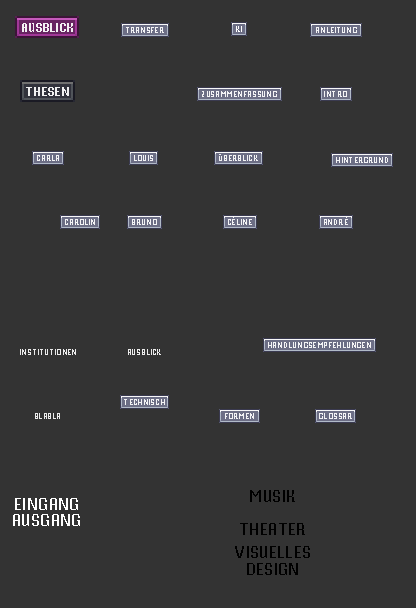
<style>
.page{position:relative;width:416px;height:608px;background:#333333}
.page>*{position:absolute;margin:0}
.t1{font:12.5px "VTFMisterPixel";color:#ffffff}
.t2{font:8.3px "VTFMisterPixel";color:#ffffff;text-transform:uppercase}
.t3{font:8.3px "VTFMisterPixel";color:#ffffff}
.t4{font:16.7px "VTFMisterPixel";color:#000000;text-transform:uppercase}
.t5{font:16.7px/16.7px "VTFMisterPixel";color:#ffffff;text-transform:uppercase}
.t6{font:16.7px/16.7px "VTFMisterPixel";color:#000000;text-transform:uppercase}
</style>
<div class="page">
<p class="t1" style="left:22px;top:23px;width:51px;height:9px;opacity:0.9">AUSBLICK</p>
<p class="t2" style="left:126px;top:27px;width:38px;height:6px;opacity:0.9">Transfer</p>
<p class="t3" style="left:236px;top:26px;width:6px;height:6px">KI</p>
<p class="t3" style="left:316px;top:27px;width:41px;height:6px;opacity:0.9">ANLEITUNG</p>
<p class="t1" style="left:26px;top:87px;width:43px;height:9px;opacity:0.9">THESEN</p>
<p class="t3" style="left:202px;top:91px;width:75px;height:6px;opacity:0.9">ZUSAMMENFASSUNG</p>
<p class="t3" style="left:324px;top:91px;width:23px;height:6px;opacity:0.9">INTRO</p>
<p class="t2" style="left:37px;top:155px;width:22px;height:6px;opacity:0.9">Carla</p>
<p class="t2" style="left:134px;top:155px;width:19px;height:6px;opacity:0.9">Louis</p>
<p class="t2" style="left:219px;top:154px;width:39px;height:7px;opacity:0.9">Überblick</p>
<p class="t2" style="left:336px;top:157px;width:52px;height:6px;opacity:0.9">Hintergrund</p>
<p class="t2" style="left:65px;top:219px;width:30px;height:6px;opacity:0.9">Carolin</p>
<p class="t2" style="left:132px;top:219px;width:25px;height:6px;opacity:0.9">Bruno</p>
<p class="t2" style="left:228px;top:217px;width:24px;height:8px;opacity:0.9">Céline</p>
<p class="t2" style="left:324px;top:217px;width:24px;height:8px;opacity:0.9">André</p>
<p class="t2" style="left:268px;top:342px;width:103px;height:6px;opacity:0.9">Handlungsempfehlungen</p>
<p class="t2" style="left:20px;top:349px;width:56px;height:6px;opacity:0.9">Institutionen</p>
<p class="t3" style="left:128px;top:349px;width:33px;height:6px;opacity:0.9">AUSBLICK</p>
<p class="t2" style="left:124px;top:399px;width:41px;height:6px;opacity:0.9">Technisch</p>
<p class="t2" style="left:35px;top:413px;width:25px;height:6px;opacity:0.9">blabla</p>
<p class="t2" style="left:225px;top:413px;width:29px;height:6px;opacity:0.9">Formen</p>
<p class="t2" style="left:319px;top:413px;width:33px;height:6px;opacity:0.9">glossar</p>
<p class="t4" style="left:250px;top:490px;width:45px;height:12px">Musik</p>
<p class="t5" style="left:13px;top:498px;width:67px;height:28px;text-align:center">eingang<br>ausgang</p>
<p class="t4" style="left:240px;top:523px;width:65px;height:12px">Theater</p>
<p class="t6" style="left:235px;top:546px;width:75px;height:29px;text-align:center">Visuelles<br>Design</p>
</div>
